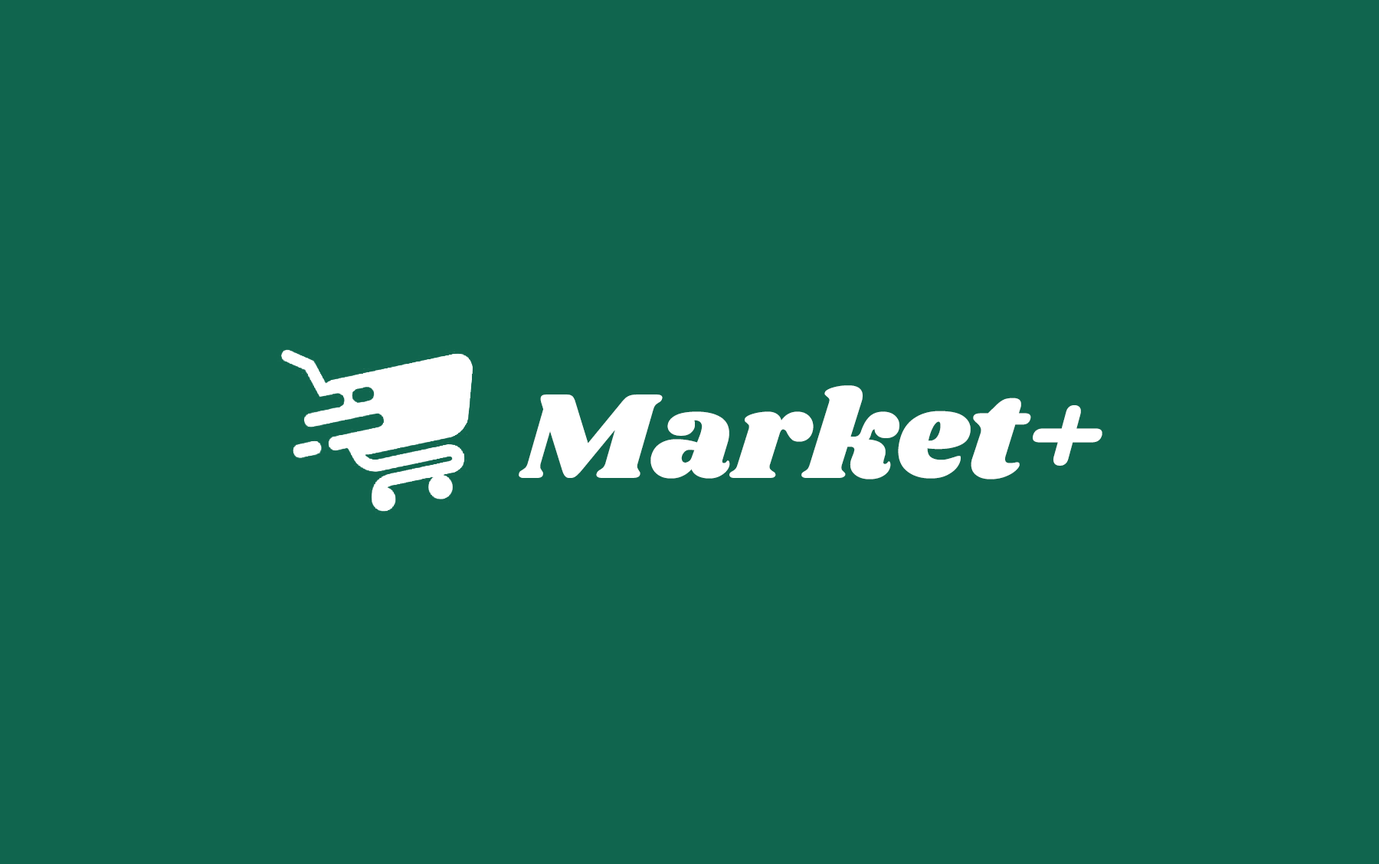
<style>
.page{position:relative;width:1379px;height:864px;background:#10654e}
.page>*{position:absolute;margin:0}
.t1{font:125.2px "Shrikhand-Regular";color:#ffffff}
</style>
<div class="page">
<p class="t1" style="left:519px;top:385px;width:584px;height:95px">Market+</p>
</div>
